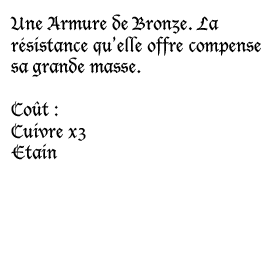
<style>
.page{position:relative;width:280px;height:261px;background:#ffffff}
.page>*{position:absolute;margin:0}
.t1{font:17.9px "LucidaBlackletter";color:#000000}
</style>
<div class="page">
<p class="t1" style="left:10px;top:14px;width:251px;height:146px">Une Armure de Bronze. La<br>résistance qu’elle offre compense<br>sa grande masse.<br><br>Coût :<br>Cuivre x3<br>Etain</p>
</div>
